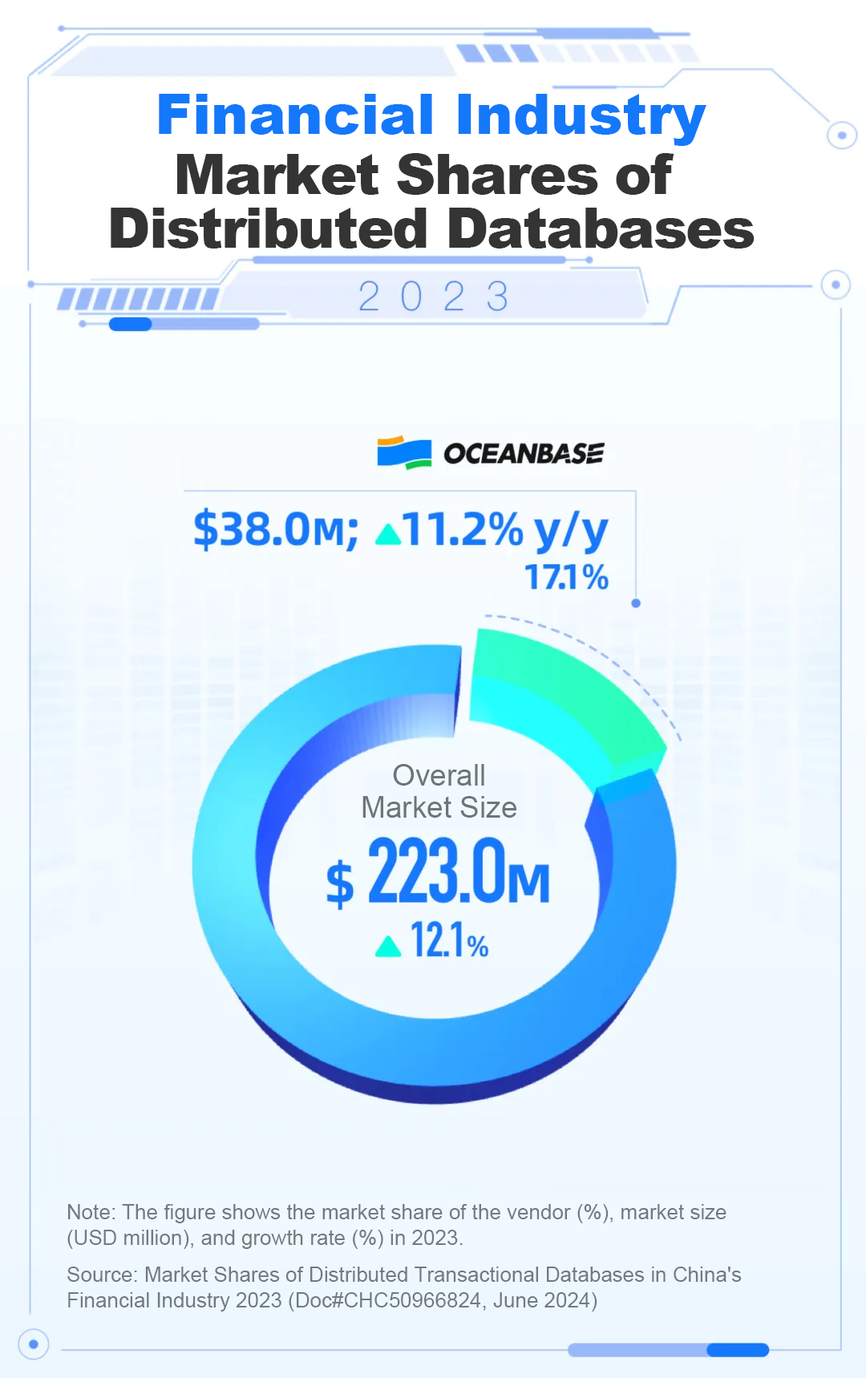
<style>
.page{position:relative;width:866px;height:1378px}
.page>*{position:absolute;margin:0}
.t1{font:56.1px "Arial-Black";color:#1478fa}
.t2{font:56.1px/53.7px "Arial-Black";letter-spacing:-0.03em;color:#343434}
.t3{font:29.7px/32.1px "ArialMT";color:#6e7577}
.t4{font:20.8px/25.6px "ArialMT";color:#727a7e}
</style>
<div class="page">
<p class="t1" style="left:159px;top:94px;width:547px;height:52px">Financial Industry</p>
<p class="t2" style="left:111px;top:153px;width:643px;height:95px;text-align:center">Market Shares of <br>Distributed Databases</p>
<p class="t3" style="left:362px;top:764px;width:154px;height:53px;text-align:center">Overall Market Size</p>
<p class="t4" style="left:67px;top:1204px;width:659px;height:45px">Note: The figure shows the market share of the vendor (%), market size <br>(USD million), and growth rate (%) in 2023.</p>
<p class="t4" style="left:67px;top:1266px;width:674px;height:45px">Source: Market Shares of Distributed Transactional Databases in China's Financial Industry 2023 (Doc#CHC50966824, June 2024)</p>
</div>
